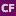
<style>
.page{position:relative;width:16px;height:16px;background:#6e0660}
.page>*{position:absolute;margin:0}
.t1{font:11px "DejaVuSansCondensed-Bold";color:#d4d4d4}
</style>
<div class="page">
<p class="t1" style="left:1px;top:3px;width:14px;height:10px">CF</p>
</div>
